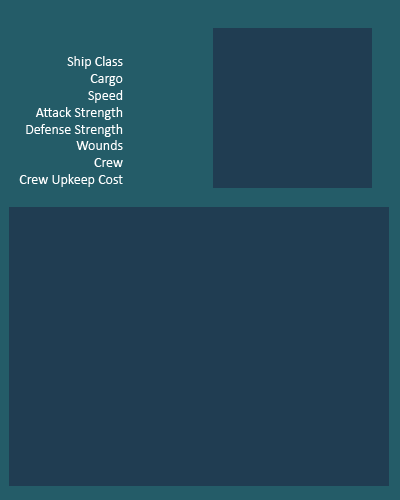
<style>
.page{position:relative;width:400px;height:500px;background:#203d52}
.page>*{position:absolute;margin:0}
.t1{font:14px "Calibri";color:#ffffff}
</style>
<div class="page">
<p class="t1" style="left:19px;top:56px;width:104px;height:131px;text-align:right">Ship Class<br>Cargo<br>Speed<br>Attack Strength<br>Defense Strength<br>Wounds<br>Crew<br>Crew Upkeep Cost</p>
</div>
